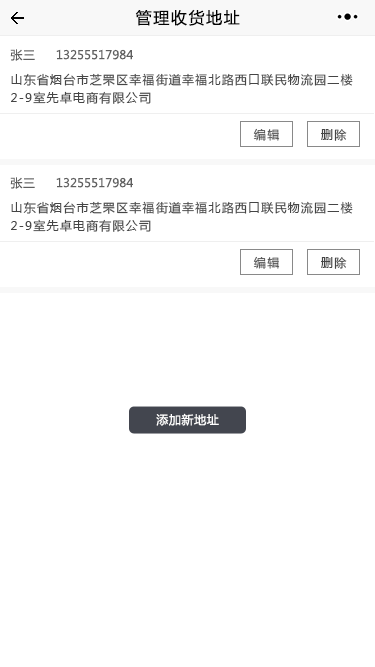
<style>
.page{position:relative;width:375px;height:667px;background:#ffffff}
.page>*{position:absolute;margin:0}
.t1{font:16px "MicrosoftYaHei";letter-spacing:0.1em;color:#020202}
.t2{font:12px "MicrosoftYaHei";letter-spacing:0.05em;color:#5f5f5f}
.t3{font:12px "MicrosoftYaHei";color:#5f5f5f}
.t4{font:12px/18px "MicrosoftYaHei";letter-spacing:0.1em;color:#454545}
.t5{font:12px "MicrosoftYaHei";letter-spacing:0.1em}
.t6{font:12px "MicrosoftYaHei";letter-spacing:0.1em;color:#454545}
.t7{font:12px "MicrosoftYaHei";letter-spacing:0.05em;color:#ffffff}
</style>
<div class="page">
<p class="t1" style="left:135px;top:9px;width:105px;height:17px">管理收货地址</p>
<p class="t2" style="left:10px;top:49px;width:25px;height:12px">张三</p>
<p class="t3" style="left:56px;top:49px;width:77px;height:11px">13255517984</p>
<p class="t4" style="left:11px;top:73px;width:342px;height:31px">山东省烟台市芝罘区幸福街道幸福北路西口联民物流园二楼<br>2-9室先卓电商有限公司</p>
<p class="t5" style="left:253px;top:128px;width:27px;height:13px">编辑</p>
<p class="t6" style="left:321px;top:129px;width:26px;height:12px">删除</p>
<p class="t2" style="left:10px;top:177px;width:25px;height:12px">张三</p>
<p class="t3" style="left:56px;top:177px;width:77px;height:11px">13255517984</p>
<p class="t4" style="left:11px;top:201px;width:342px;height:31px">山东省烟台市芝罘区幸福街道幸福北路西口联民物流园二楼<br>2-9室先卓电商有限公司</p>
<p class="t5" style="left:253px;top:256px;width:27px;height:13px">编辑</p>
<p class="t6" style="left:321px;top:257px;width:26px;height:12px">删除</p>
<p class="t7" style="left:156px;top:413px;width:63px;height:13px">添加新地址</p>
</div>
